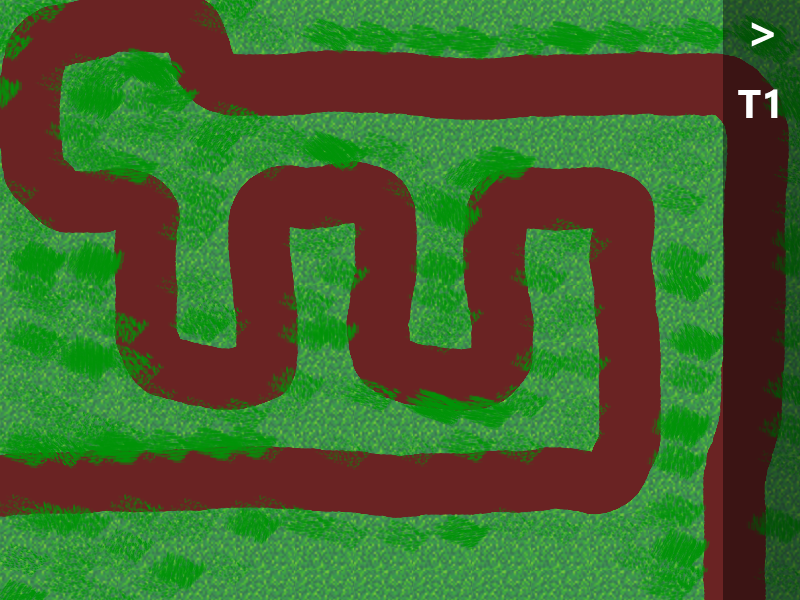
<style>
.page{position:relative;width:800px;height:600px;background:#6a2323}
.page>*{position:absolute;margin:0}
.t1{font:40px "SegoeUI-Bold";color:#ffffff}
</style>
<div class="page">
<p class="t1" style="left:738px;top:89px;width:40px;height:29px">T1</p>
</div>
